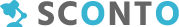
<style>
.page{position:relative;width:179px;height:27px;background:#ffffff}
.page>*{position:absolute;margin:0}
.t1{font:35px "Hind-Bold";letter-spacing:0.05em;color:#666666;text-transform:uppercase}
.t2{font:35px "Hind-Bold";letter-spacing:0.05em;color:#36b4d2;text-transform:uppercase}
</style>
<div class="page">
<p class="t1" style="left:38px;top:1px;width:141px;height:25px">Sc<span class="t2">o</span>nt<span class="t2">o</span></p>
</div>
